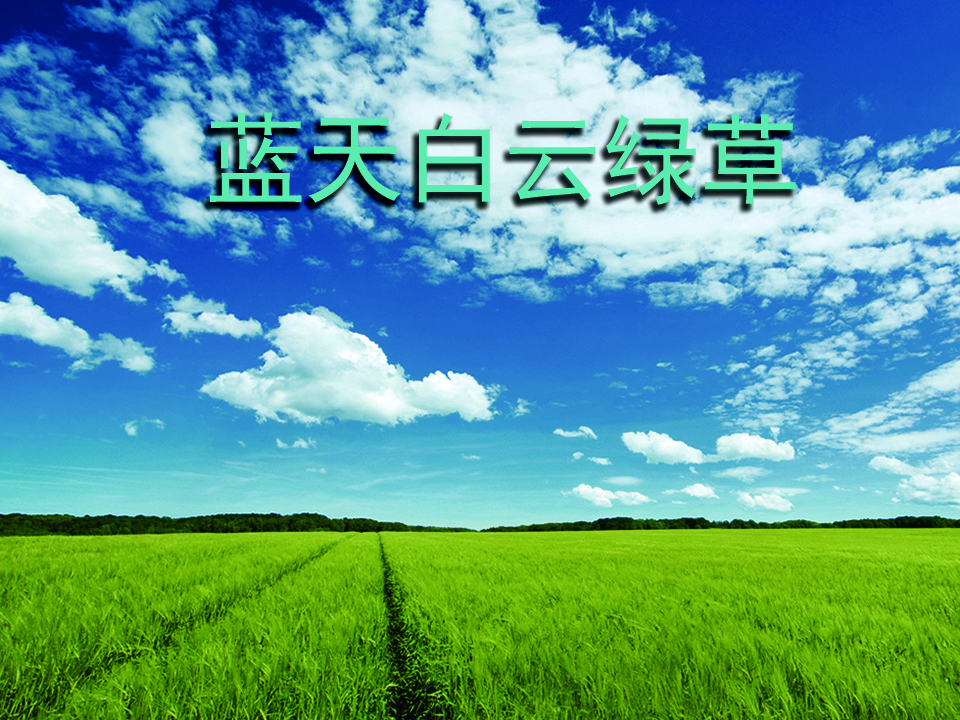
<style>
.page{position:relative;width:960px;height:720px}
.page>*{position:absolute;margin:0}
.t1{font:99px "SimHei";color:#59eeaf}
</style>
<div class="page">
<p class="t1" style="left:209px;top:112px;width:587px;height:93px">蓝天白云绿草</p>
</div>
